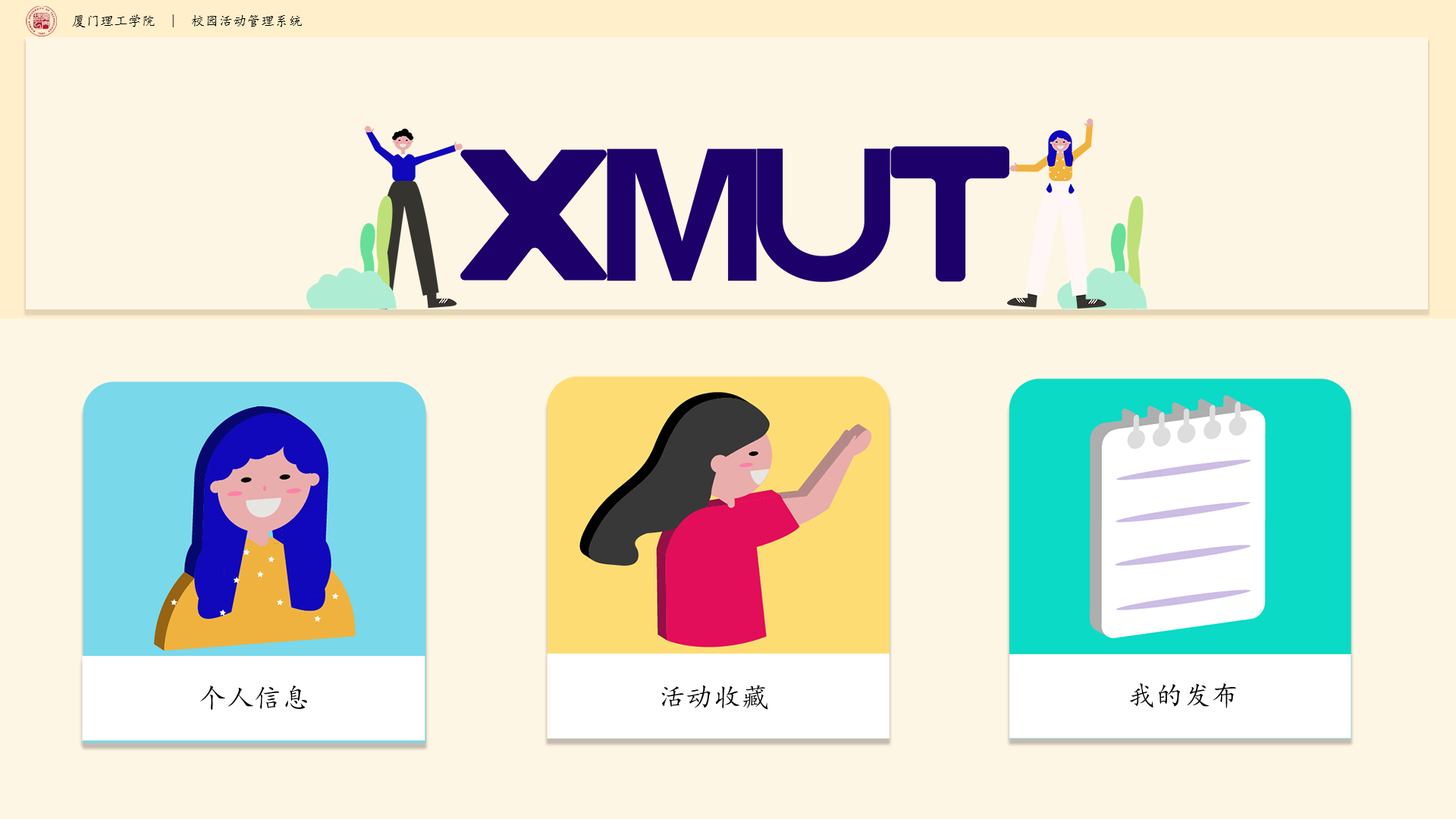
<style>
.page{position:relative;width:1456px;height:819px;background:#fef6e4}
.page>*{position:absolute;margin:0}
.t1{font:13.6px "KaiTi";letter-spacing:0.02em;color:#020202}
.t2{font:13.6px "KaiTi";letter-spacing:0.02em;color:#000000}
.t3{font:13.6px "KaiTi";letter-spacing:0.02em;color:#626266}
.t4{font:27.3px "KaiTi";letter-spacing:0.02em;color:#000000}
</style>
<div class="page">
<p class="t1" style="left:72px;top:14px;width:230px;height:13px"><span class="t2">厦门理工学院</span><span class="t3">  |</span>  校园活动管理系统</p>
<p class="t4" style="left:200px;top:686px;width:107px;height:25px">个人信息</p>
<p class="t4" style="left:661px;top:685px;width:107px;height:25px">活动收藏</p>
<p class="t4" style="left:1130px;top:683px;width:106px;height:25px">我的发布</p>
</div>
